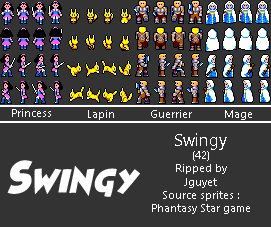
<style>
.page{position:relative;width:271px;height:227px;background:#333333}
.page>*{position:absolute;margin:0}
.t1{font:11.1px "NirmalaUI";color:#ffffff}
.t2{font:16.7px "NirmalaUI";color:#ffffff}
.t3{font:22.2px "HeroesLegend";color:#ffffff}
.t4{font:25px "HeroesLegend";color:#ffffff}
</style>
<div class="page">
<p class="t1" style="left:12px;top:109px;width:39px;height:8px">Princess</p>
<p class="t1" style="left:88px;top:110px;width:26px;height:10px">Lapin</p>
<p class="t1" style="left:151px;top:110px;width:41px;height:8px">Guerrier</p>
<p class="t1" style="left:225px;top:110px;width:27px;height:10px">Mage</p>
<p class="t1" style="left:152px;top:133px;width:98px;height:81px;text-align:center"><span class="t2">Swingy<br></span>(42)<br>Ripped by<br>Jguyet<br>Source sprites :<br>Phantasy Star game</p>
<p class="t3" style="left:7px;top:160px;width:133px;height:37px"><span class="t4">S</span>wingy</p>
</div>
